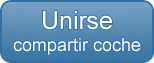
<style>
.page{position:relative;width:154px;height:63px}
.page>*{position:absolute;margin:0}
.t1{font:18px "ArialMT";color:#ffffff}
.t2{font:25px "ArialMT";color:#ffffff}
</style>
<div class="page">
<p class="t1" style="left:13px;top:11px;width:128px;height:44px;text-align:center"><span class="t2">Unirse<br></span>compartir coche</p>
</div>
